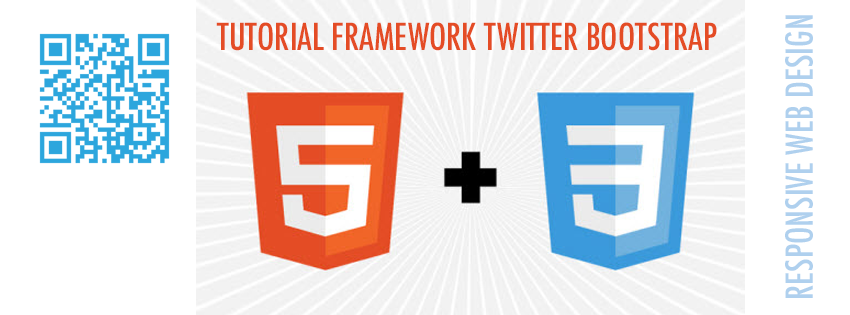
<style>
.page{position:relative;width:850px;height:315px;background:#ffffff}
.page>*{position:absolute;margin:0}
.t1{font:36.2px "Futura-CondensedMedium";color:#afd0ee}
.t2{font:36px "Futura-CondensedMedium";color:#e44c25}
</style>
<div class="page">
<p class="t1" style="left:785px;top:15px;width:28px;height:283px;rotate:-90deg">RESPONSIVE WEB DESIGN</p>
<p class="t2" style="left:216px;top:22px;width:501px;height:29px">TUTORIAL FRAMEWORK TWITTER BOOTSTRAP</p>
</div>
